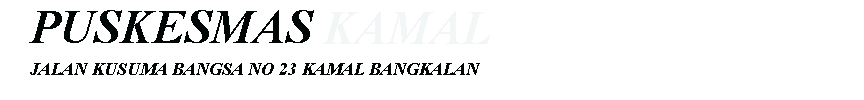
<style>
.page{position:relative;width:864px;height:100px;background:#ffffff}
.page>*{position:absolute;margin:0}
.t1{font:48px "TimesNewRomanPS-BoldItalicMT";color:#000506}
.t2{font:18px "TimesNewRomanPS-BoldItalicMT";color:#000506}
</style>
<div class="page">
<p class="t1" style="left:29px;top:10px;width:285px;height:33px">PUSKESMAS</p>
<p class="t2" style="left:30px;top:63px;width:450px;height:12px">JALAN KUSUMA BANGSA NO 23 KAMAL BANGKALAN</p>
</div>
